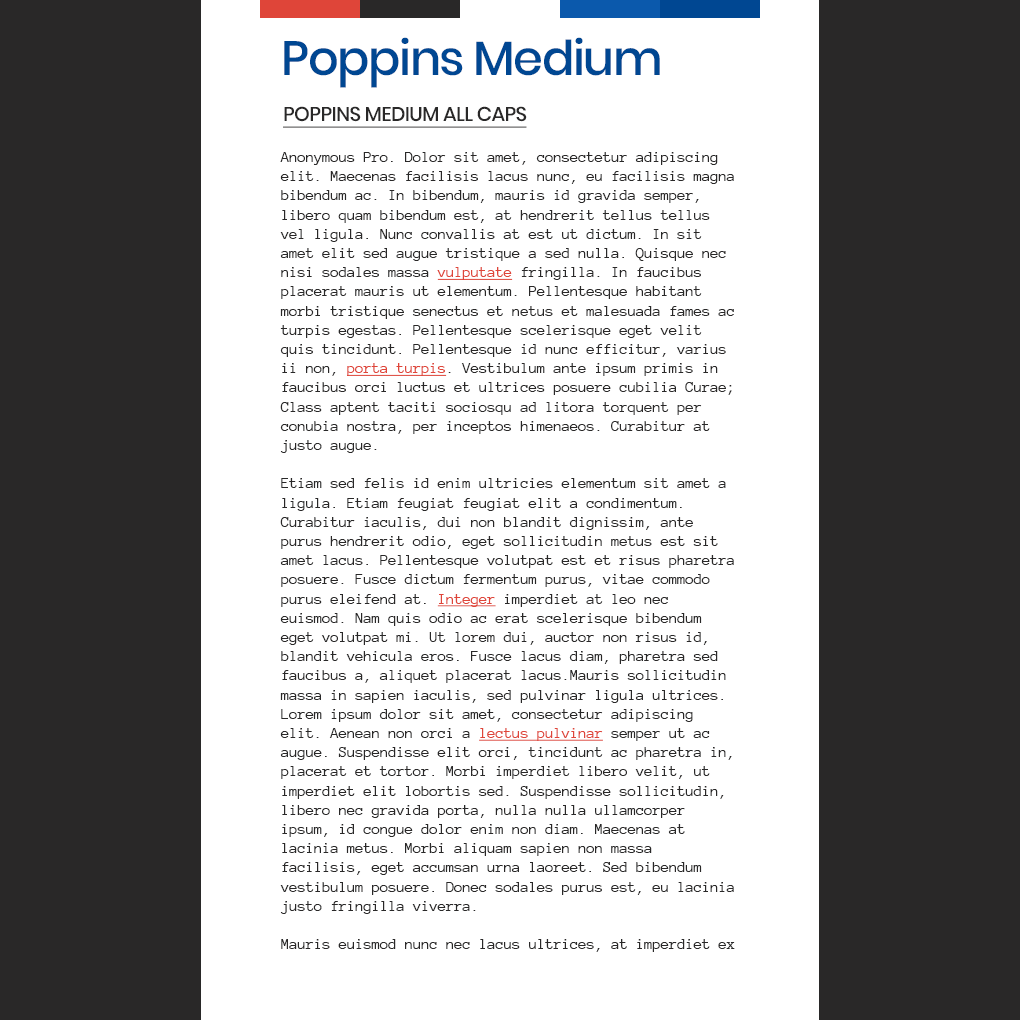
<style>
.page{position:relative;width:1020px;height:1020px;background:#ffffff}
.page>*{position:absolute;margin:0}
.t1{font:48px "Poppins-Medium";letter-spacing:-0.03em;color:#004792}
.t2{font:20px "Poppins-Medium";letter-spacing:-0.03em;color:#292828;text-transform:uppercase;text-decoration:underline}
.t3{font:16px "AnonymousPro-Regular";letter-spacing:-0.03em;color:#292828}
.t4{font:16px "AnonymousPro-Regular";letter-spacing:-0.03em;color:#df4539;text-decoration:underline}
</style>
<div class="page">
<p class="t1" style="left:284px;top:37px;width:376px;height:51px">Poppins Medium</p>
<p class="t2" style="left:283px;top:106px;width:244px;height:22px">Poppins Medium All Caps</p>
<p class="t3" style="left:280px;top:152px;width:455px;height:800px">Anonymous Pro. Dolor sit amet, consectetur adipiscing elit. Maecenas facilisis lacus nunc, eu facilisis magna bibendum ac. In bibendum, mauris id gravida semper, libero quam bibendum est, at hendrerit tellus tellus vel ligula. Nunc convallis at est ut dictum. In sit amet elit sed augue tristique a sed nulla. Quisque nec nisi sodales massa <span class="t4">vulputate </span>fringilla. In faucibus placerat mauris ut elementum. Pellentesque habitant morbi tristique senectus et netus et malesuada fames ac turpis egestas. Pellentesque scelerisque eget velit quis tincidunt. Pellentesque id nunc efficitur, varius ii non, <span class="t4">porta turpis</span>. Vestibulum ante ipsum primis in faucibus orci luctus et ultrices posuere cubilia Curae; Class aptent taciti sociosqu ad litora torquent per conubia nostra, per inceptos himenaeos. Curabitur at justo augue.<br><br>Etiam sed felis id enim ultricies elementum sit amet a ligula. Etiam feugiat feugiat elit a condimentum. Curabitur iaculis, dui non blandit dignissim, ante purus hendrerit odio, eget sollicitudin metus est sit amet lacus. Pellentesque volutpat est et risus pharetra posuere. Fusce dictum fermentum purus, vitae commodo purus eleifend at. <span class="t4">Integer </span>imperdiet at leo nec euismod. Nam quis odio ac erat scelerisque bibendum eget volutpat mi. Ut lorem dui, auctor non risus id, blandit vehicula eros. Fusce lacus diam, pharetra sed faucibus a, aliquet placerat lacus.Mauris sollicitudin massa in sapien iaculis, sed pulvinar ligula ultrices. Lorem ipsum dolor sit amet, consectetur adipiscing elit. Aenean non orci a <span class="t4">lectus pulvinar</span> semper ut ac augue. Suspendisse elit orci, tincidunt ac pharetra in, placerat et tortor. Morbi imperdiet libero velit, ut imperdiet elit lobortis sed. Suspendisse sollicitudin, libero nec gravida porta, nulla nulla ullamcorper ipsum, id congue dolor enim non diam. Maecenas at lacinia metus. Morbi aliquam sapien non massa facilisis, eget accumsan urna laoreet. Sed bibendum vestibulum posuere. Donec sodales purus est, eu lacinia justo fringilla viverra.<br><br>Mauris euismod nunc nec lacus ultrices, at imperdiet ex venenatis. Ut mollis leo sit amet augue tristique, non tincidunt purus facilisis. Vivamus dictum scelerisque odio, nec sollicitudin tellus. Etiam blandit tortor et ligula finibus, eu pharetra justo consectetur. Etiam id metus augue. Phasellus gravida massa non mi cursus congue. Mauris sed massa in erat malesuada semper. Sed auctor tellus at nisi condimentum tincidunt. Phasellus lobortis, eros ac auctor lacinia, erat nulla cursus arcu, sed ultrices nunc dolor vitae felis.</p>
</div>
